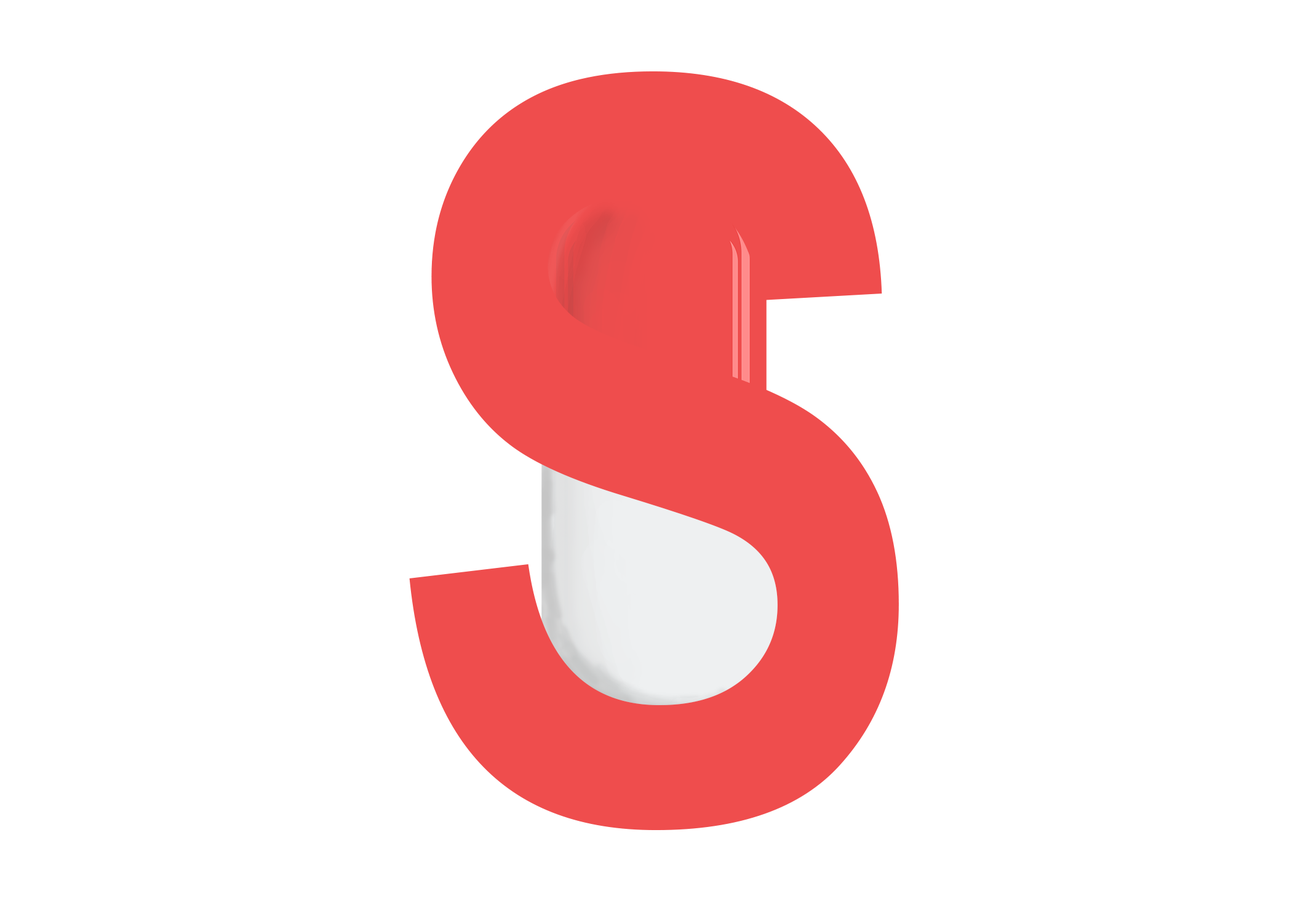
<style>
.page{position:relative;width:1292px;height:923px;background:#ffffff}
.page>*{position:absolute;margin:0}
.t1{font:1025.4px "ArialNarrow-Bold";color:#ef4d4d}
</style>
<div class="page">
<p class="t1" style="left:409px;top:71px;width:490px;height:759px">S</p>
</div>
